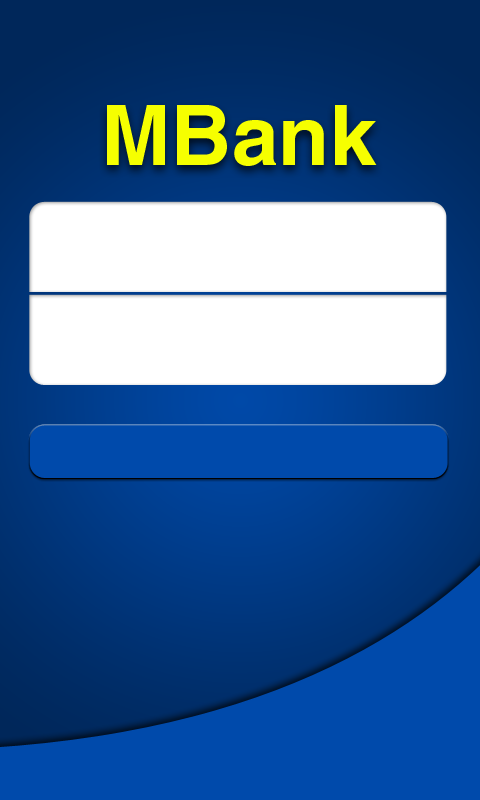
<style>
.page{position:relative;width:480px;height:800px}
.page>*{position:absolute;margin:0}
.t1{font:83.9px "HelveticaLTStd-Bold";color:#f6ff00}
</style>
<div class="page">
<p class="t1" style="left:107px;top:105px;width:270px;height:61px">MBank</p>
</div>
